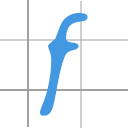
<style>
.page{position:relative;width:128px;height:128px;background:#ffffff}
.page>*{position:absolute;margin:0}
.t1{font:130px "AveriaSansLibre-LightItalic";color:#4299e1}
</style>
<div class="page">
<p class="t1" style="left:40px;top:13px;width:48px;height:103px">f</p>
</div>
